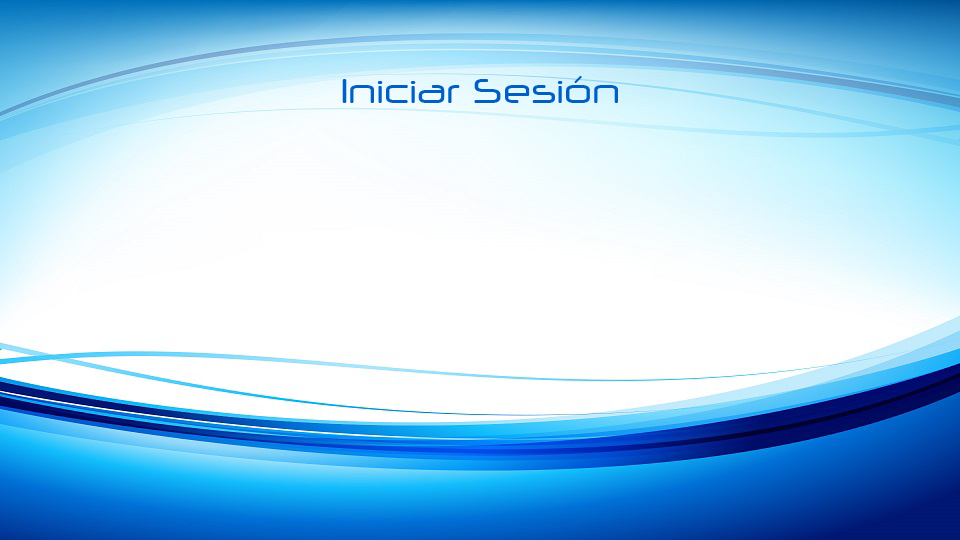
<style>
.page{position:relative;width:960px;height:540px}
.page>*{position:absolute;margin:0}
.t1{font:37.3px "NeuropolXRg-Regular";color:#015fc3}
</style>
<div class="page">
<p class="t1" style="left:342px;top:76px;width:276px;height:27px">Iniciar Sesión</p>
</div>
